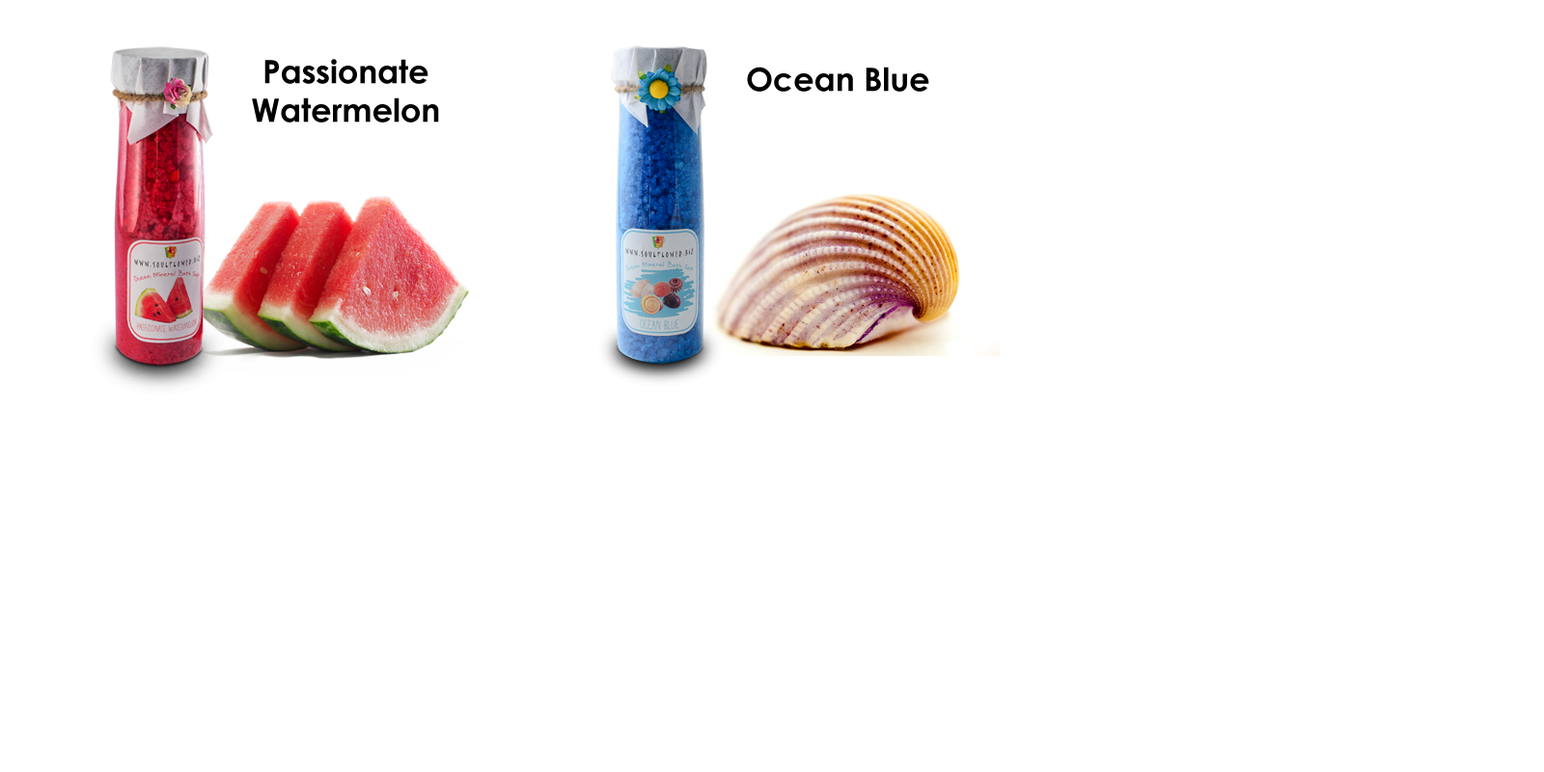
<style>
.page{position:relative;width:1544px;height:772px;background:#ffffff}
.page>*{position:absolute;margin:0}
.t1{font:32.2px "CenturyGothic-Bold";color:#000000}
</style>
<div class="page">
<p class="t1" style="left:252px;top:59px;width:187px;height:64px;text-align:center">Passionate<br>Watermelon</p>
<p class="t1" style="left:747px;top:67px;width:182px;height:25px">Ocean Blue</p>
</div>
